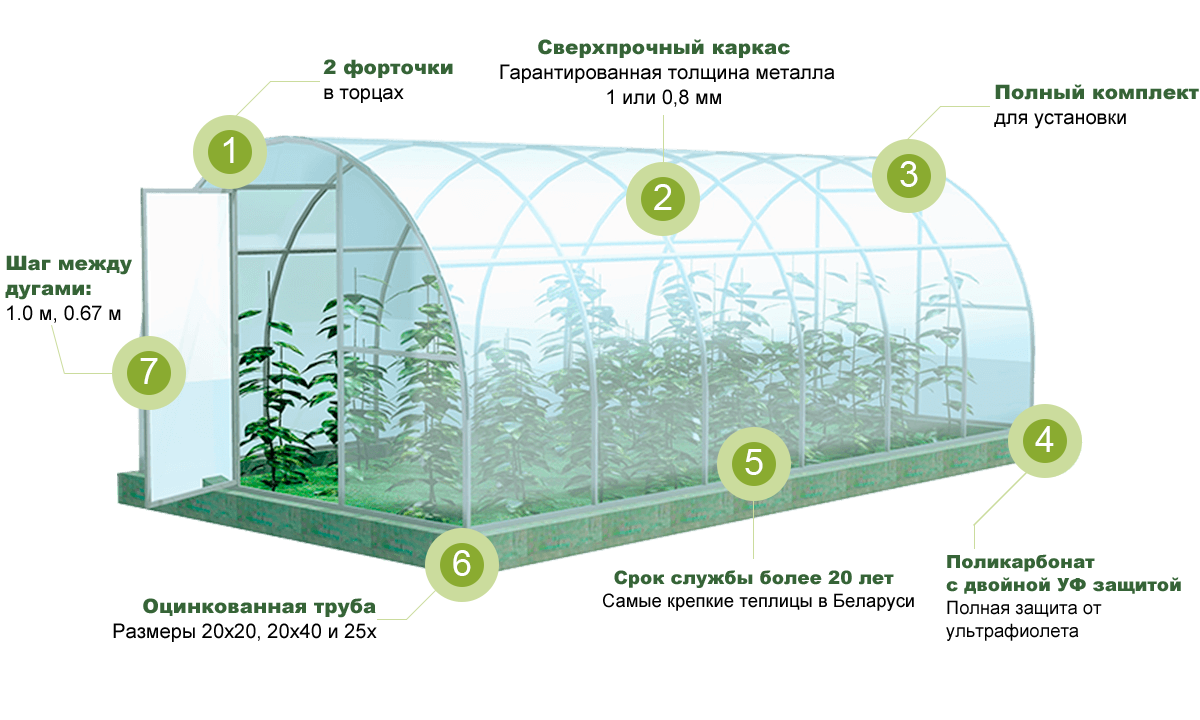
<style>
.page{position:relative;width:1200px;height:720px;background:#ffffff}
.page>*{position:absolute;margin:0}
.t1{font:20px/25px "ArialMT";color:#000000}
.t2{font:20px/25px "Arial-Black";color:#366437}
.t3{font:36px "ArialMT";color:#ffffff}
.t4{font:18.3px/22.9px "Arial-Black";color:#366437}
.t5{font:18.3px/22.9px "ArialMT";color:#000000}
.t6{font:18.4px/23px "ArialMT";color:#000000}
.t7{font:18.4px/23px "Arial-Black";color:#366437}
</style>
<div class="page">
<p class="t1" style="left:500px;top:39px;width:335px;height:68px;text-align:center"><span class="t2">Сверхпрочный каркас<br></span> Гарантированная толщина металла 1 или 0,8 мм</p>
<p class="t2" style="left:323px;top:59px;width:130px;height:44px">2 форточки<br><span class="t1">в торцах</span></p>
<p class="t2" style="left:994px;top:84px;width:205px;height:45px">Полный комплект<br><span class="t1">для установки</span></p>
<p class="t3" style="left:223px;top:137px;width:11px;height:26px">1</p>
<p class="t3" style="left:900px;top:161px;width:18px;height:26px">3</p>
<p class="t3" style="left:654px;top:184px;width:18px;height:26px">2</p>
<p class="t2" style="left:5px;top:255px;width:127px;height:68px">Шаг между<br>дугами:<br><span class="t1">1.0 м, 0.67 м</span></p>
<p class="t3" style="left:140px;top:358px;width:18px;height:26px">7</p>
<p class="t3" style="left:1035px;top:426px;width:19px;height:26px">4</p>
<p class="t3" style="left:745px;top:449px;width:18px;height:26px">5</p>
<p class="t3" style="left:453px;top:550px;width:18px;height:26px">6</p>
<p class="t4" style="left:946px;top:554px;width:235px;height:87px">Поликарбонат<br>с двойной УФ защитой<br><span class="t5">Полная защита от ультрафиолета</span></p>
<p class="t6" style="left:603px;top:570px;width:311px;height:41px;text-align:center"><span class="t7">Срок службы более 20 лет<br></span>  Самые крепкие теплицы в Беларуси</p>
<p class="t1" style="left:113px;top:598px;width:264px;height:44px;text-align:right"><span class="t2">Оцинкованная труба<br></span> Размеры 20х20, 20х40 и 25х25 мм</p>
</div>
